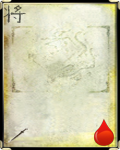
<style>
.page{position:relative;width:120px;height:150px}
.page>*{position:absolute;margin:0}
.t1{font:25px "FZGLJW--GB1-0";color:#58564c}
</style>
<div class="page">
<p class="t1" style="left:3px;top:5px;width:23px;height:18px">将</p>
</div>
